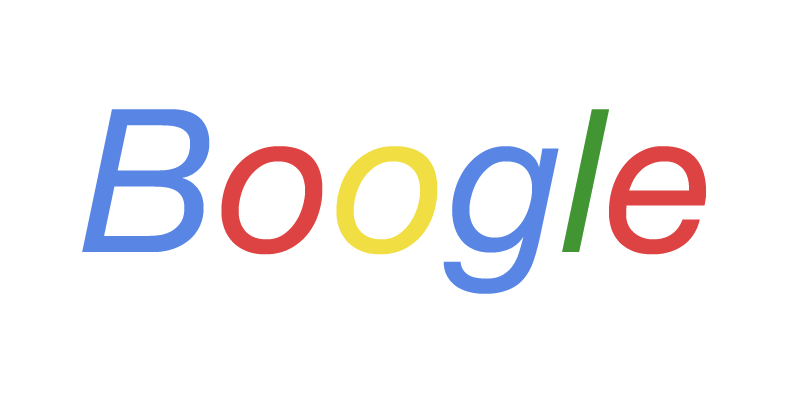
<style>
.page{position:relative;width:800px;height:400px;background:#ffffff}
.page>*{position:absolute;margin:0}
.t1{font:200px "HelveticaNeue-Italic";color:#5986e4}
.t2{font:200px "HelveticaNeue-Italic";color:#de4343}
.t3{font:200px "HelveticaNeue-Italic";color:#f0de43}
.t4{font:200px "HelveticaNeue-Italic";color:#419633}
</style>
<div class="page">
<p class="t1" style="left:82px;top:109px;width:625px;height:185px">B<span class="t2">o</span><span class="t3">o</span>g<span class="t4">l</span><span class="t2">e</span></p>
</div>
